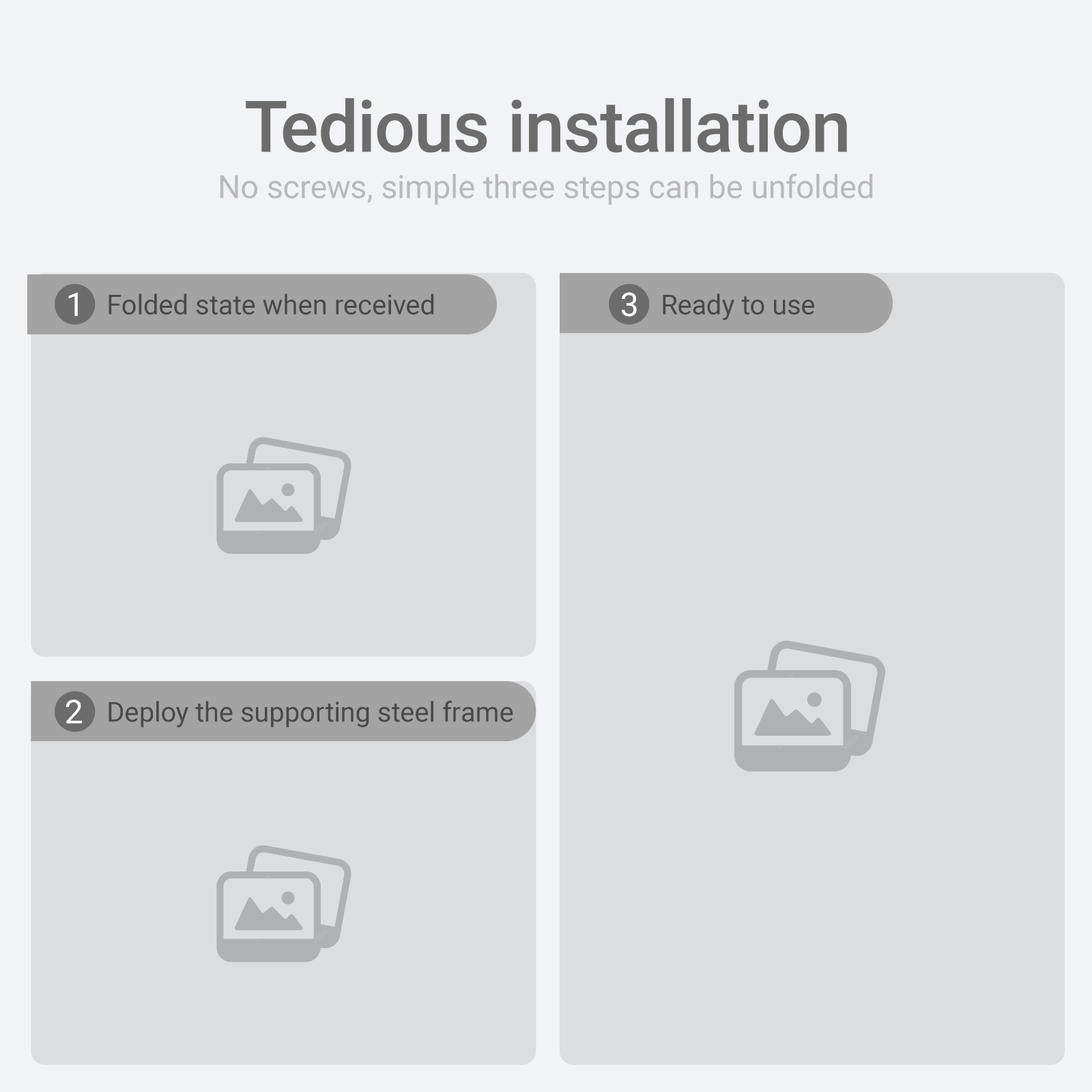
<style>
.page{position:relative;width:1092px;height:1092px;background:#dcdddf}
.page>*{position:absolute;margin:0}
.t1{font:71.3px "Roboto-Medium";color:#6c6c6c}
.t2{font:32px "Roboto-Regular";color:#a3a3a3}
.t3{font:32.8px "Roboto-Regular";color:#ffffff;text-transform:uppercase}
.t4{font:27.3px "Roboto-Regular";color:#49494a}
</style>
<div class="page">
<p class="t1" style="left:246px;top:98px;width:601px;height:55px">Tedious installation</p>
<p class="t2" style="left:220px;top:173px;width:653px;height:32px;opacity:0.75">No screws, simple three steps can be unfolded</p>
<p class="t3" style="left:68px;top:292px;width:10px;height:24px">1</p>
<p class="t4" style="left:109px;top:293px;width:325px;height:22px">Folded state when received</p>
<p class="t3" style="left:622px;top:292px;width:15px;height:25px">3</p>
<p class="t4" style="left:663px;top:293px;width:151px;height:27px">Ready to use</p>
<p class="t3" style="left:66px;top:700px;width:16px;height:23px">2</p>
<p class="t4" style="left:109px;top:700px;width:404px;height:28px">Deploy the supporting steel frame</p>
</div>
